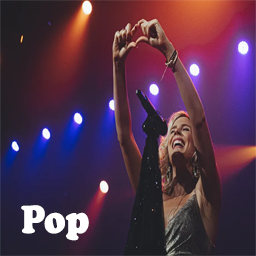
<style>
.page{position:relative;width:256px;height:256px}
.page>*{position:absolute;margin:0}
.t1{font:41px "CooperBlack";color:#ffffff;scale:0.86 1}
</style>
<div class="page">
<p class="t1" style="left:21px;top:205px;width:68px;height:36px">Pop</p>
</div>
